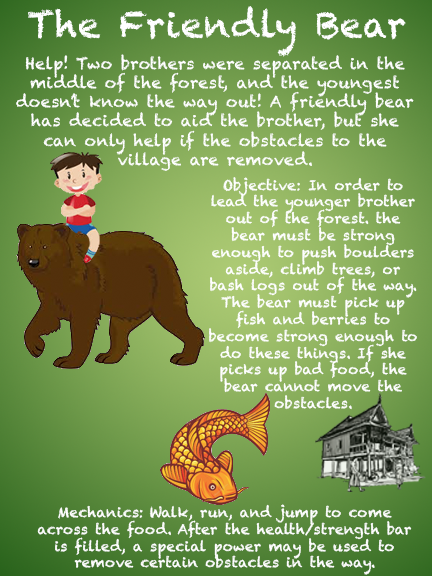
<style>
.page{position:relative;width:432px;height:576px}
.page>*{position:absolute;margin:0}
.t1{font:36px "Chalkduster";letter-spacing:0.015em;color:#ffffff}
.t2{font:16px "Chalkduster";letter-spacing:0.015em;color:#ffffff}
.t3{font:14px "Chalkduster";letter-spacing:0.015em;color:#ffffff}
</style>
<div class="page">
<p class="t1" style="left:28px;top:6px;width:378px;height:51px">The Friendly Bear</p>
<p class="t2" style="left:16px;top:54px;width:398px;height:117px;text-align:center">Help! Two brothers were separated in the middle of the forest, and the youngest doesn’t know the way out! A friendly bear has decided to aid the brother, but she can only help if the obstacles to the village are removed.</p>
<p class="t3" style="left:209px;top:177px;width:208px;height:233px;text-align:center">Objective: In order to lead the younger brother out of the forest. the bear must be strong enough to push boulders aside, climb trees, or bash logs out of the way. The bear must pick up fish and berries to become strong enough to do these things. If she picks up bad food, the bear cannot move the obstacles.</p>
<p class="t3" style="left:37px;top:504px;width:375px;height:71px;text-align:center">Mechanics: Walk, run, and jump to come across the food. After the health/strength bar is filled, a special power may be used to remove certain obstacles in the way.</p>
</div>
